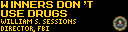
<style>
.page{position:relative;width:128px;height:32px;background:#000000}
.page>*{position:absolute;margin:0}
.t1{font:8px/9px "MegaMan-2";color:#ffcd24}
.t2{font:8px/7px "Pixelated";color:#ffcd24}
</style>
<div class="page">
<p class="t1" style="left:1px;top:1px;width:92px;height:16px">WINNERS DON'T<br>USE DRUGS</p>
<p class="t2" style="left:1px;top:19px;width:75px;height:13px">WILLIAM  S.  SESSIONS<br>DIRECTOR,  FBI</p>
</div>
